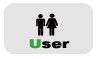
<style>
.page{position:relative;width:97px;height:59px;background:#e3e4e3}
.page>*{position:absolute;margin:0}
.t1{font:12px "Arial-Black";color:#090a09;font-weight:bold;scale:1.26 1}
.t2{font:11.6px "Arial-Black";color:#2eaa37;font-weight:bold;scale:1.26 1}
.t3{font:12px "Arial-Black";color:#2eaa37;font-weight:bold;scale:1.26 1}
</style>
<div class="page">
<p class="t1" style="left:29px;top:39px;width:41px;height:10px"><span class="t2"><br><br></span><span class="t3">U</span>ser</p>
</div>
